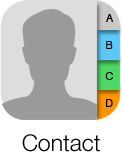
<style>
.page{position:relative;width:123px;height:152px;background:#9a9a9a}
.page>*{position:absolute;margin:0}
.t1{font:10.8px "Helvetica";color:#000000}
.t2{font:23px "HelveticaNeue-Light";color:#000000}
</style>
<div class="page">
<p class="t1" style="left:106px;top:14px;width:8px;height:8px">A</p>
<p class="t1" style="left:106px;top:41px;width:7px;height:8px">B</p>
<p class="t1" style="left:105px;top:72px;width:8px;height:8px">C</p>
<p class="t1" style="left:106px;top:99px;width:7px;height:8px">D</p>
<p class="t2" style="left:22px;top:134px;width:78px;height:18px">Contact</p>
</div>
